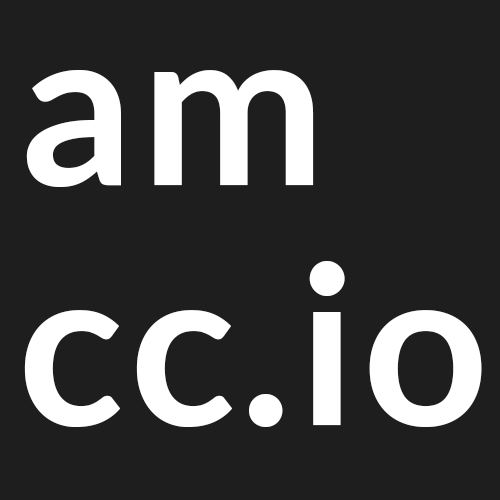
<style>
.page{position:relative;width:500px;height:500px;background:#1e1e1e}
.page>*{position:absolute;margin:0}
.t1{font:220px/240px "Lato-Bold";letter-spacing:0.03em;color:#ffffff}
</style>
<div class="page">
<p class="t1" style="left:24px;top:70px;width:458px;height:357px">am<br>cc.io</p>
</div>
